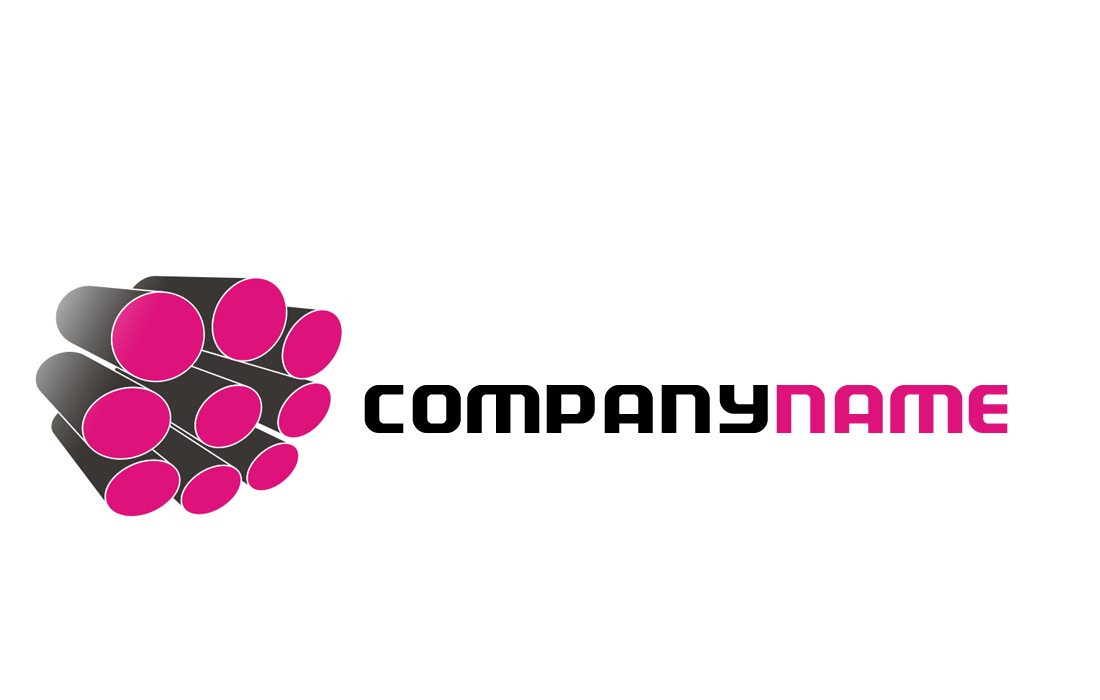
<style>
.page{position:relative;width:1100px;height:700px;background:#ffffff}
.page>*{position:absolute;margin:0}
.t1{font:72px "Electrofied";color:#000000}
.t2{font:72px "Electrofied";color:#dd137b}
</style>
<div class="page">
<p class="t1" style="left:364px;top:385px;width:644px;height:48px">COMPANY<span class="t2">NAME</span></p>
</div>
